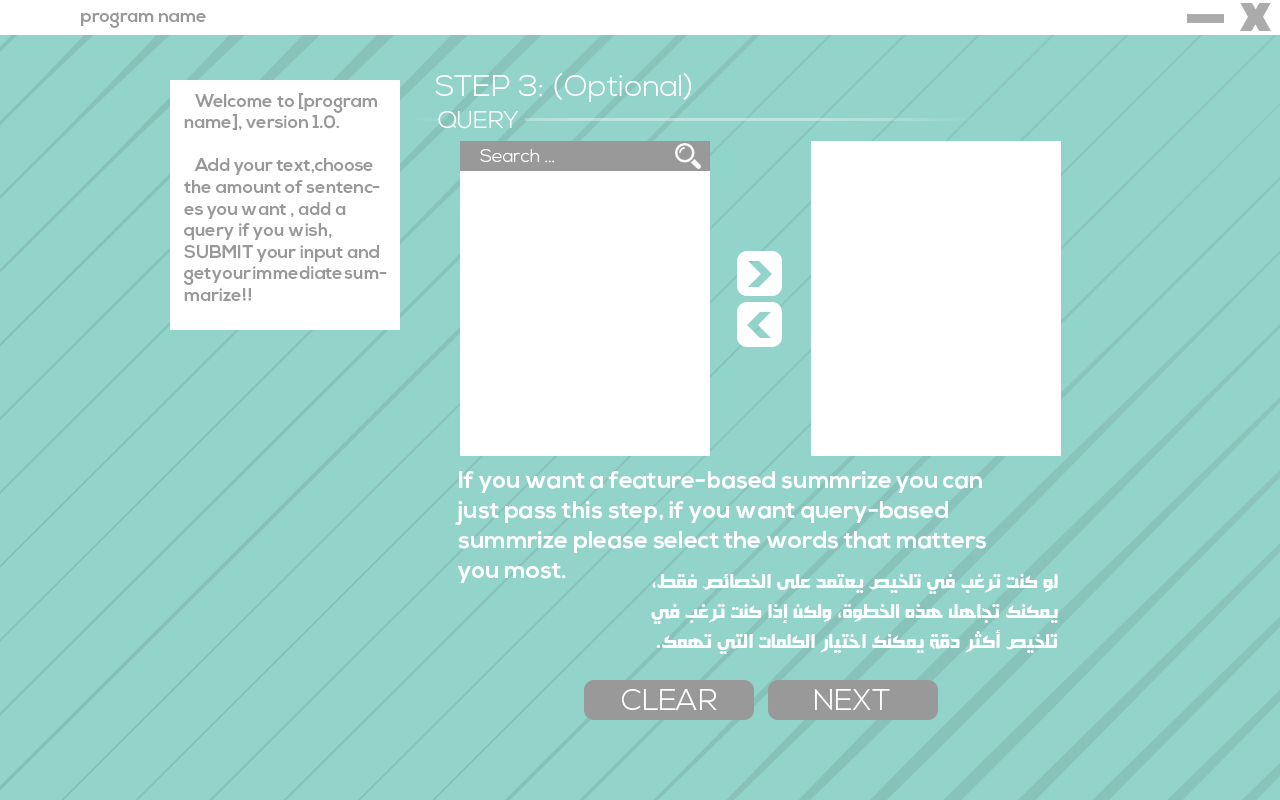
<style>
.page{position:relative;width:1280px;height:800px;background:#92d4ca}
.page>*{position:absolute;margin:0}
.t1{font:18px "NexaBold";color:#999999}
.t2{font:30px "NexaLight";color:#ffffff}
.t3{font:24px "NexaLight";color:#ffffff;text-transform:uppercase}
.t4{font:18px "NexaLight";color:#ffffff}
.t5{font:24px/30px "NexaBold";color:#ffffff}
.t6{font:24px/30px "HacenSamra";color:#ffffff}
.t7{font:30px "NexaLight";color:#ffffff;text-transform:uppercase}
</style>
<div class="page">
<p class="t1" style="left:81px;top:12px;width:125px;height:16px">program name</p>
<p class="t2" style="left:435px;top:73px;width:256px;height:29px">STEP 3: (Optional)</p>
<p class="t1" style="left:184px;top:93px;width:203px;height:208px">Welcome to [program name], version 1.0.<br><br>   Add your text,choose the amount of sentences you want , add a query if you wish, SUBMIT your input and get your immediate summarize!!</p>
<p class="t3" style="left:438px;top:111px;width:80px;height:18px">Query</p>
<p class="t4" style="left:480px;top:149px;width:74px;height:14px">Search ...</p>
<p class="t5" style="left:455px;top:471px;width:531px;height:112px">If you want a feature-based summrize you can<br>just pass this step, if you want query-based<br>summrize please select the words that matters<br>you most.</p>
<p class="t6" style="left:651px;top:574px;width:407px;height:80px">لو كنت ترغب في تلخيص يعتمد على الخصائص فقط،<br>يمكنك تجاهل هذه الخطوة، ولكن إذا كنت ترغب في<br>تلخيص أكثر دقة يمكنك اختيار الكلمات التي تهمك.</p>
<p class="t7" style="left:622px;top:689px;width:95px;height:21px">Clear</p>
<p class="t7" style="left:815px;top:689px;width:75px;height:21px">Next</p>
</div>
